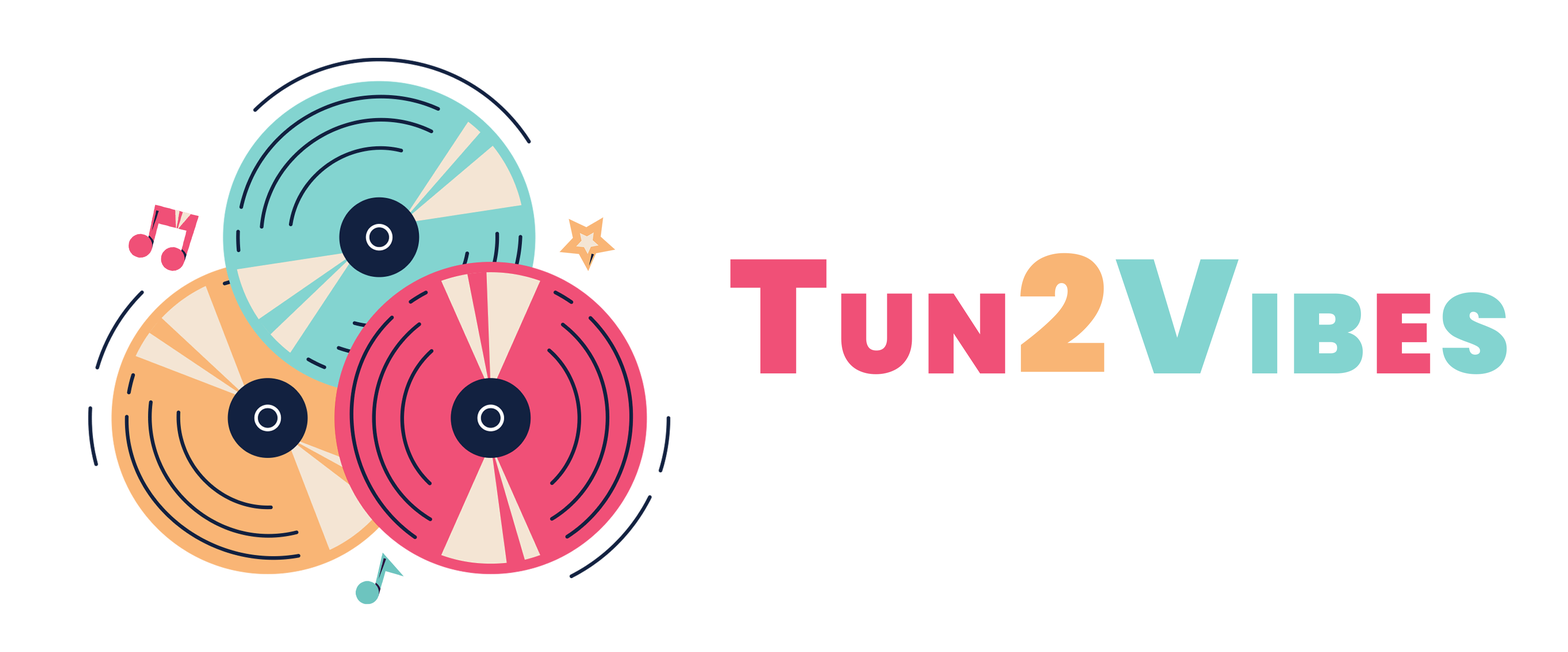
<style>
.page{position:relative;width:1568px;height:652px;background:#ffffff}
.page>*{position:absolute;margin:0}
.t1{font:161.1px "Poppins-Black";letter-spacing:0.05em;color:#f05077;font-variant:small-caps}
.t2{font:161.1px "Poppins-Black";letter-spacing:0.05em;color:#f05077}
.t3{font:161.1px "Poppins-Black";letter-spacing:0.05em;color:#f9b575}
.t4{font:161.1px "Poppins-Black";letter-spacing:0.05em;color:#83d4d0}
.t5{font:161.1px "Poppins-Black";letter-spacing:0.05em;color:#83d4d0;font-variant:small-caps}
</style>
<div class="page">
<p class="t1" style="left:730px;top:253px;width:777px;height:121px"><span class="t2">T</span>un<span class="t3">2</span><span class="t4">V</span><span class="t5">ib</span>e<span class="t5">s</span></p>
</div>
